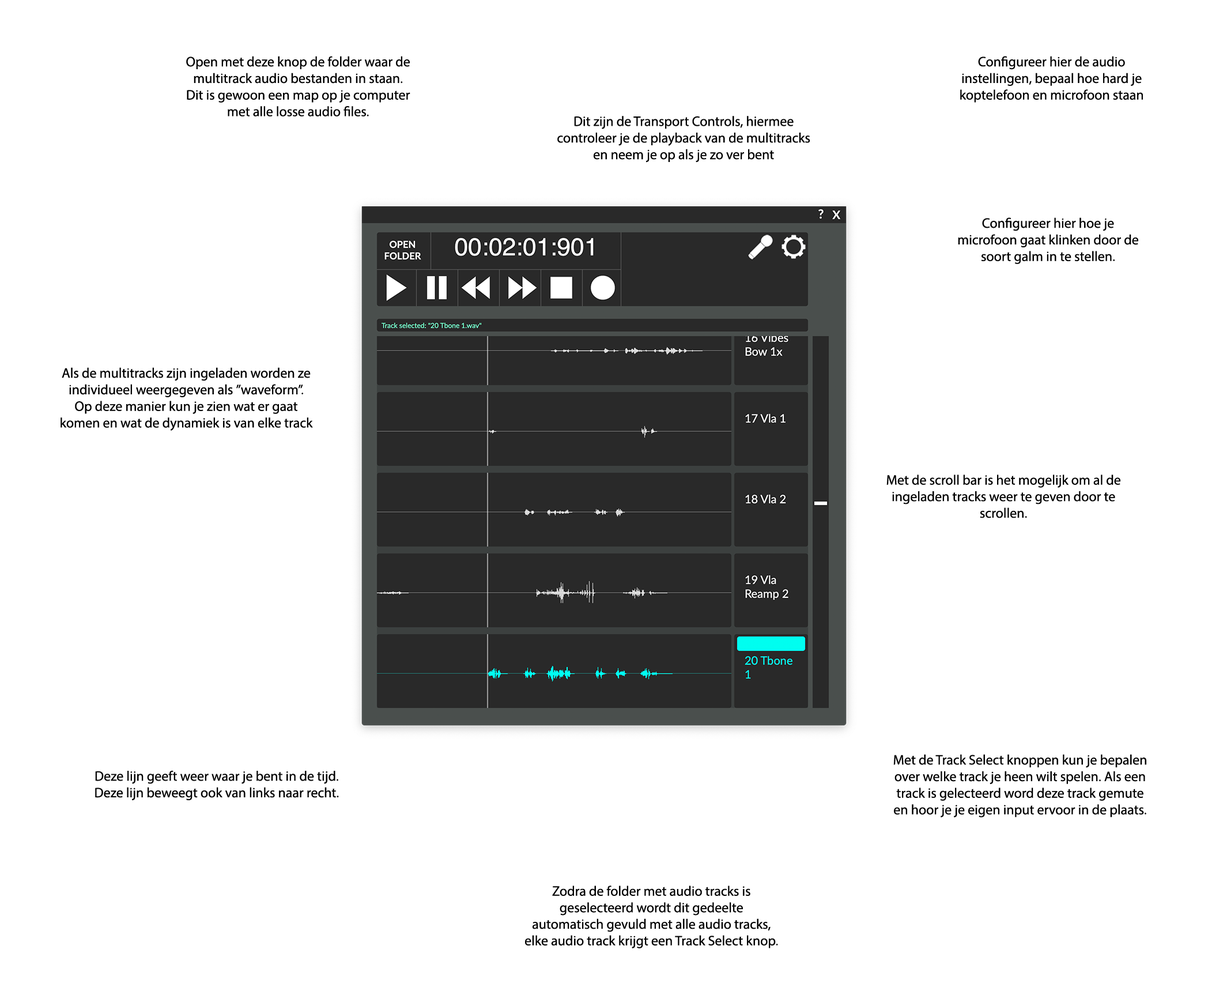
<style>
.page{position:relative;width:1208px;height:987px;background:#ffffff}
.page>*{position:absolute;margin:0}
.t1{font:13.8px "MyriadPro-Regular";color:#000000}
</style>
<div class="page">
<p class="t1" style="left:186px;top:56px;width:224px;height:60px;text-align:center">Open met deze knop de folder waar de <br>multitrack audio bestanden in staan. Dit is gewoon een map op je computer met alle losse audio files.</p>
<p class="t1" style="left:960px;top:56px;width:183px;height:47px;text-align:center">Configureer hier de audio instellingen, bepaal hoe hard je koptelefoon en microfoon staan</p>
<p class="t1" style="left:557px;top:116px;width:254px;height:47px;text-align:center">Dit zijn de Transport Controls, hiermee controleer je de playback van de multitracks en neem je op als je zo ver bent</p>
<p class="t1" style="left:958px;top:217px;width:181px;height:47px;text-align:center">Configureer hier hoe je microfoon gaat klinken door de soort galm in te stellen.</p>
<p class="t1" style="left:61px;top:367px;width:252px;height:64px;text-align:center">Als de multitracks zijn ingeladen worden ze individueel weergegeven als ’’waveform’’. Op deze manier kun je zien wat er gaat komen en wat de dynamiek is van elke track</p>
<p class="t1" style="left:887px;top:474px;width:234px;height:44px;text-align:center">Met de scroll bar is het mogelijk om al de ingeladen tracks weer te geven door te scrollen.</p>
<p class="t1" style="left:894px;top:754px;width:253px;height:63px;text-align:center">Met de Track Select knoppen kun je bepalen over welke track je heen wilt spelen. Als een track is gelecteerd word deze track gemute en hoor je je eigen input ervoor in de plaats.</p>
<p class="t1" style="left:95px;top:770px;width:244px;height:30px;text-align:center">Deze lijn geeft weer waar je bent in de tijd. Deze lijn beweegt ook van links naar recht.</p>
<p class="t1" style="left:525px;top:885px;width:253px;height:63px;text-align:center">Zodra de folder met audio tracks is geselecteerd wordt dit gedeelte automatisch gevuld met alle audio tracks, elke audio track krijgt een Track Select knop.</p>
</div>
